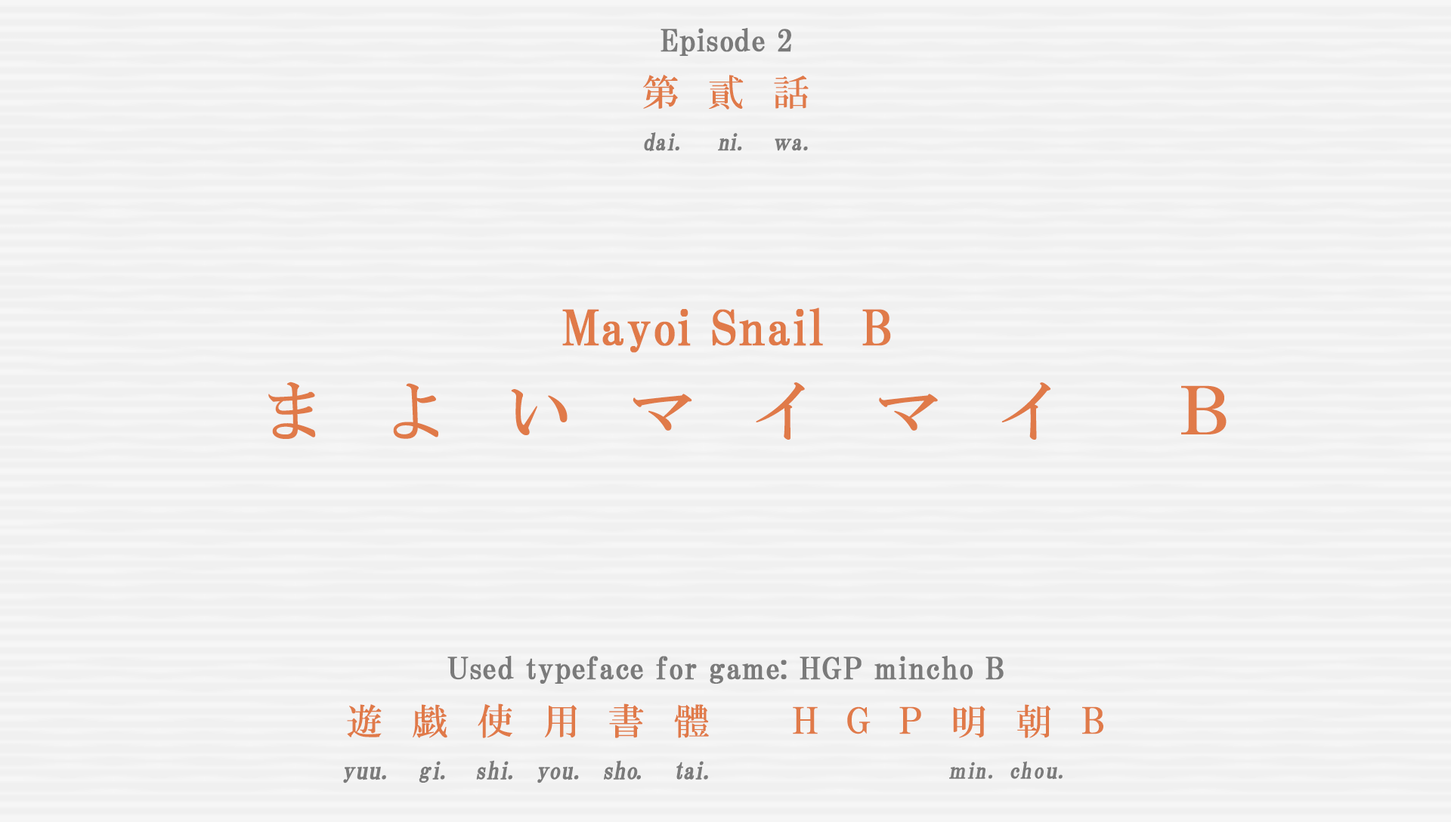
<style>
.page{position:relative;width:1451px;height:822px;background:#f0f0f0}
.page>*{position:absolute;margin:0}
.t1{font:30.2px "HGPMinchoB";letter-spacing:0.01em;color:#7a7a7a;font-weight:bold}
.t2{font:36.5px "HGMinchoB";letter-spacing:0.79em;color:#e07a49}
.t3{font:23.2px "HGMinchoB";letter-spacing:-0.1em;color:#7a7a7a;font-weight:bold;scale:0.96 1}
.t4{font:23.2px "HGMinchoB";color:#7a7a7a;font-weight:bold;scale:0.96 1}
.t5{font:23.2px "HGMinchoB";letter-spacing:-0.075em;color:#7a7a7a;font-weight:bold;scale:0.96 1}
.t6{font:23.2px "HGMinchoB";letter-spacing:0.07em;color:#7a7a7a;font-weight:bold;scale:0.96 1}
.t7{font:23.2px "HGMinchoB";letter-spacing:-0.05em;color:#7a7a7a;font-weight:bold;scale:0.86 1}
.t8{font:48.4px "HGPMinchoB";letter-spacing:0.01em;color:#e07a49;font-weight:bold}
.t9{font:65.7px "HGMinchoB";letter-spacing:0.87em;color:#e07a49}
.t10{font:36.3px "HGMinchoB";letter-spacing:0.81em;color:#e07a49}
.t11{font:36.3px "HGMinchoB";letter-spacing:0.8em;color:#e07a49}
.t12{font:36.3px "HGMinchoB";letter-spacing:0.79em;color:#e07a49}
.t13{font:36.3px "HGMinchoB";letter-spacing:0.71em;color:#e07a49;scale:0.85 1}
.t14{font:36.3px "HGMinchoB";letter-spacing:0.53em;color:#e07a49}
.t15{font:24.2px "HGMinchoB";color:#7a7a7a;font-weight:bold}
.t16{font:24.2px "HGMinchoB";letter-spacing:0.025em;color:#7a7a7a;font-weight:bold;scale:0.96 1}
.t17{font:24.2px "HGMinchoB";letter-spacing:0.075em;color:#7a7a7a;font-weight:bold;scale:0.96 1}
.t18{font:24.2px "HGMinchoB";letter-spacing:-0.025em;color:#7a7a7a;font-weight:bold;scale:0.96 1}
.t19{font:24.2px "HGMinchoB";letter-spacing:-0.11em;color:#7a7a7a;font-weight:bold;scale:0.96 1}
.t20{font:24.2px "HGMinchoB";color:#7a7a7a;font-weight:bold;scale:0.96 1}
.t21{font:24.2px "HGMinchoB";letter-spacing:-0.05em;color:#7a7a7a;font-weight:bold;scale:0.96 1}
.t22{font:24.2px "HGMinchoB";letter-spacing:-0.12em;color:#7a7a7a;font-weight:bold;scale:0.96 1}
.t23{font:24.2px "HGMinchoB";letter-spacing:-0.01em;color:#7a7a7a;font-weight:bold;scale:0.96 1}
.t24{font:24.2px "HGMinchoB";letter-spacing:0.005em;color:#7a7a7a;font-weight:bold;scale:0.96 1}
.t25{font:24.2px "HGMinchoB";letter-spacing:-0.09em;color:#7a7a7a;font-weight:bold;scale:0.96 1}
.t26{font:24.2px "HGMinchoB";letter-spacing:-0.075em;color:#7a7a7a;font-weight:bold;scale:0.96 1}
.t27{font:24.2px "HGMinchoB";letter-spacing:-0.1em;color:#7a7a7a;font-weight:bold;scale:0.96 1}
.t28{font:22px "HGMinchoB";letter-spacing:0.07em;color:#7a7a7a;font-weight:bold;scale:0.96 1}
.t29{font:22px "HGMinchoB";letter-spacing:-0.075em;color:#7a7a7a;font-weight:bold;scale:0.83 1}
.t30{font:22px "HGMinchoB";letter-spacing:-0.075em;color:#7a7a7a;font-weight:bold;scale:0.96 1}
.t31{font:22px "HGMinchoB";color:#7a7a7a;font-weight:bold;scale:0.96 1}
.t32{font:22px "HGMinchoB";letter-spacing:0.05em;color:#7a7a7a;font-weight:bold;scale:0.96 1}
.t33{font:22px "HGMinchoB";letter-spacing:0.01em;color:#7a7a7a;font-weight:bold;scale:1.06 1}
</style>
<div class="page">
<p class="t1" style="left:660px;top:28px;width:131px;height:28px">Episode 2</p>
<p class="t2" style="left:643px;top:75px;width:165px;height:35px">第貳話</p>
<p class="t3" style="left:644px;top:132px;width:164px;height:19px"><span class="t4">d</span><span class="t5">a</span>i<span class="t6">.  </span>ni<span class="t6">.  </span><span class="t7">ｗ</span><span class="t4">a</span><span class="t6">.</span></p>
<p class="t8" style="left:562px;top:308px;width:329px;height:45px">Mayoi Snail  B</p>
<p class="t9" style="left:268px;top:382px;width:958px;height:58px">まよいマイマイ Ｂ</p>
<p class="t1" style="left:447px;top:656px;width:556px;height:28px">Used typeface for game: HGP mincho B</p>
<p class="t10" style="left:347px;top:703px;width:362px;height:35px">遊<span class="t11">戯</span>使<span class="t12">用</span>書體</p>
<p class="t13" style="left:793px;top:706px;width:310px;height:28px">ＨＧＰ    Ｂ</p>
<p class="t12" style="left:953px;top:704px;width:97px;height:34px">明<span class="t14">朝</span></p>
<p class="t15" style="left:343px;top:760px;width:365px;height:23px"><span class="t16">y</span>uu<span class="t17">. </span><span class="t18">g</span><span class="t19">i</span><span class="t17">. </span><span class="t20">s</span><span class="t21">h</span><span class="t22">i</span><span class="t17">. </span><span class="t23">y</span><span class="t24">ou</span><span class="t17">. </span><span class="t18">s</span><span class="t20">h</span><span class="t25">o</span><span class="t17">.  </span><span class="t26">t</span><span class="t27">ai</span><span class="t17">.</span></p>
<p class="t28" style="left:949px;top:761px;width:113px;height:19px"><span class="t29">ｍ</span><span class="t30">i</span>n. <span class="t31">c</span>h<span class="t32">o</span><span class="t33">u</span>.</p>
</div>
